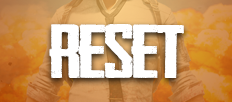
<style>
.page{position:relative;width:232px;height:102px}
.page>*{position:absolute;margin:0}
.t1{font:72px "HeadlinerNo.45";letter-spacing:-0.04em;color:#ffffff;scale:1.32 1}
</style>
<div class="page">
<p class="t1" style="left:49px;top:24px;width:135px;height:54px">RESET</p>
</div>
